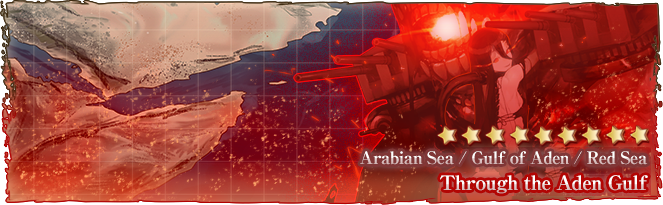
<style>
.page{position:relative;width:663px;height:205px}
.page>*{position:absolute;margin:0}
.t1{font:17px "RyuminPro-ExBold";letter-spacing:-0.04em}
.t2{font:20px "RyuminPro-ExBold";letter-spacing:-0.04em}
</style>
<div class="page">
<p class="t1" style="left:360px;top:151px;width:288px;height:14px">Arabian Sea / Gulf of Aden / Red Sea</p>
<p class="t2" style="left:440px;top:175px;width:208px;height:19px">Through the Aden Gulf</p>
</div>
